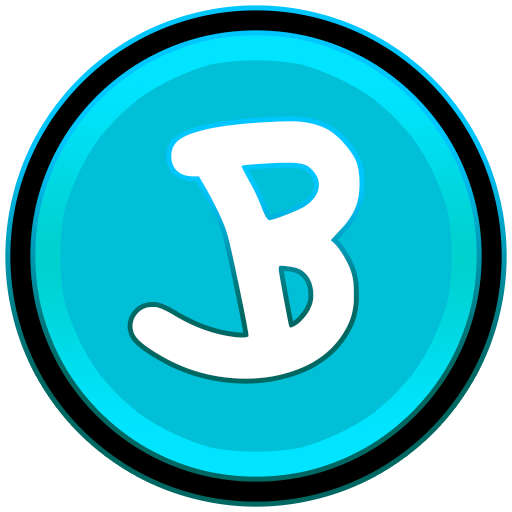
<style>
.page{position:relative;width:512px;height:512px;background:#ffffff}
.page>*{position:absolute;margin:0}
.t1{font:400px "Brutal_bounce-Regular";color:#ffffff}
</style>
<div class="page">
<p class="t1" style="left:132px;top:121px;width:228px;height:258px">B</p>
</div>
